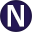
<style>
.page{position:relative;width:32px;height:32px;background:#ffffff}
.page>*{position:absolute;margin:0}
.t1{font:28.5px "Verdana";letter-spacing:0.05em;color:#ffffff;font-weight:bold}
</style>
<div class="page">
<p class="t1" style="left:7px;top:5px;width:17px;height:22px">N</p>
</div>
